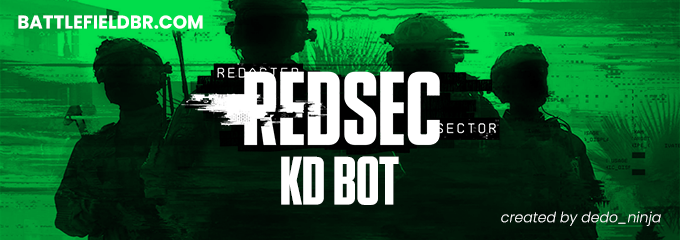
<style>
.page{position:relative;width:680px;height:240px}
.page>*{position:absolute;margin:0}
.t1{font:18.4px "Poppins-Bold";color:#ffffff;text-transform:uppercase}
.t2{font:68.1px "BF_HEADLINE_NARROW-BOLD";color:#ffffff;text-transform:uppercase}
.t3{font:14.1px "Poppins-LightItalic";color:#ffffff}
</style>
<div class="page">
<p class="t1" style="left:18px;top:15px;width:185px;height:14px">battlefieldbr.com</p>
<p class="t2" style="left:281px;top:156px;width:118px;height:49px">kd bot</p>
<p class="t3" style="left:501px;top:211px;width:160px;height:15px">created by dedo_ninja</p>
</div>
